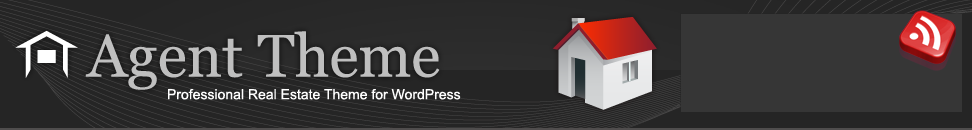
<style>
.page{position:relative;width:972px;height:130px;background:#252525}
.page>*{position:absolute;margin:0}
.t1{font:60px "Georgia";color:#bfbfbf}
.t2{font:14px "ArialMT";color:#ffffff}
</style>
<div class="page">
<p class="t1" style="left:85px;top:31px;width:355px;height:59px">Agent Theme</p>
<p class="t2" style="left:168px;top:89px;width:293px;height:11px">Professional Real Estate Theme for WordPress</p>
</div>
